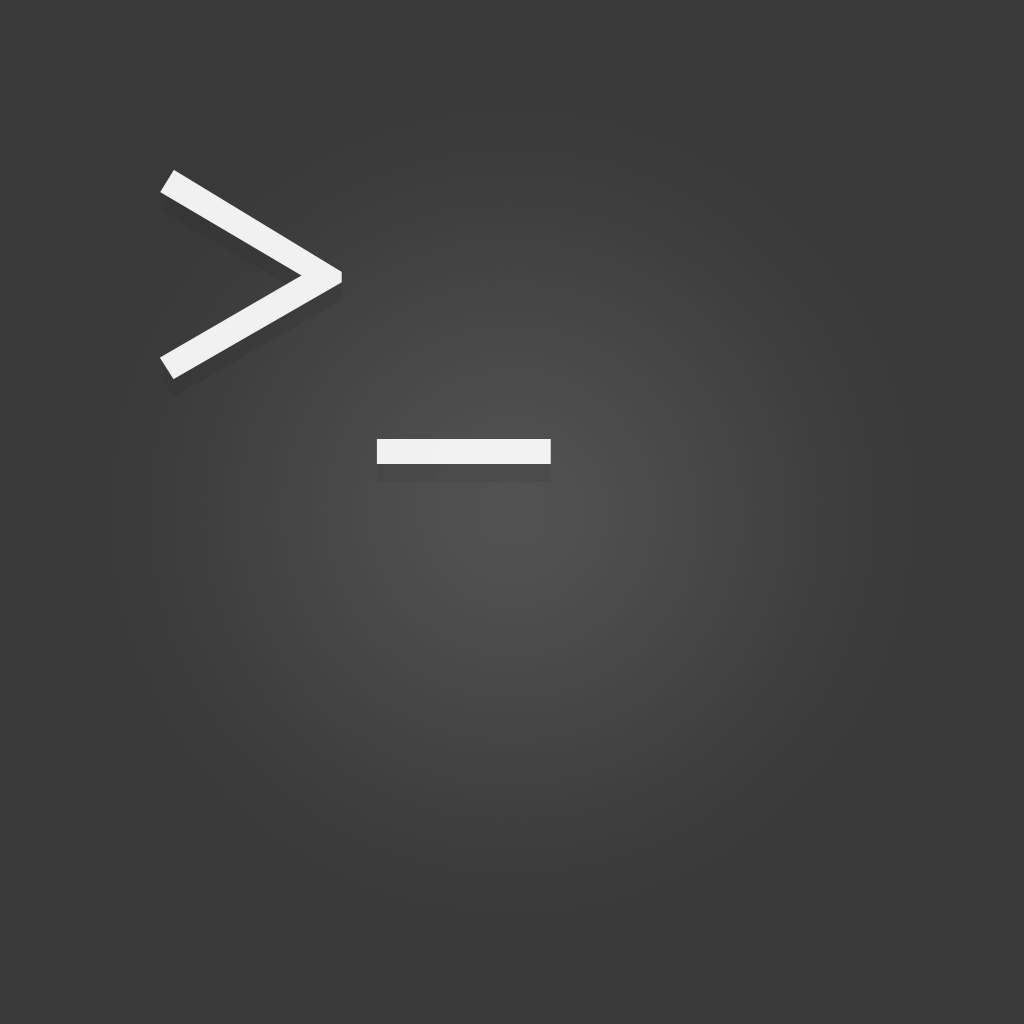
<style>
.page{position:relative;width:1024px;height:1024px;background:#39393a}
.page>*{position:absolute;margin:0}
.t1{font:356px "PTMono-Regular";color:#ffffff}
</style>
<div class="page">
<p class="t1" style="left:160px;top:170px;width:391px;height:294px;opacity:0.9">&gt;_</p>
</div>
